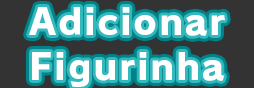
<style>
.page{position:relative;width:254px;height:88px;background:#333333}
.page>*{position:absolute;margin:0}
.t1{font:36px/44.4px "RodinPro-EB";letter-spacing:0.05em;color:#ffffff}
</style>
<div class="page">
<p class="t1" style="left:29px;top:7px;width:196px;height:80px;text-align:center">Adicionar<br>Figurinha</p>
</div>
